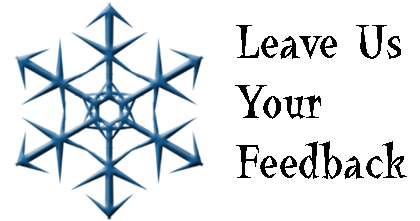
<style>
.page{position:relative;width:420px;height:221px;background:#ffffff}
.page>*{position:absolute;margin:0}
.t1{font:50px "LaBambaLetPlain";color:#000000}
</style>
<div class="page">
<p class="t1" style="left:235px;top:25px;width:172px;height:154px">Leave Us<br>Your<br>Feedback</p>
</div>
